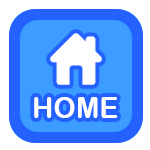
<style>
.page{position:relative;width:150px;height:150px;background:#ffffff}
.page>*{position:absolute;margin:0}
.t1{font:28.8px "ArialRoundedMTBold";letter-spacing:0.025em;color:#ffffff;scale:0.96 1}
</style>
<div class="page">
<p class="t1" style="left:34px;top:97px;width:84px;height:21px">HOME</p>
</div>
